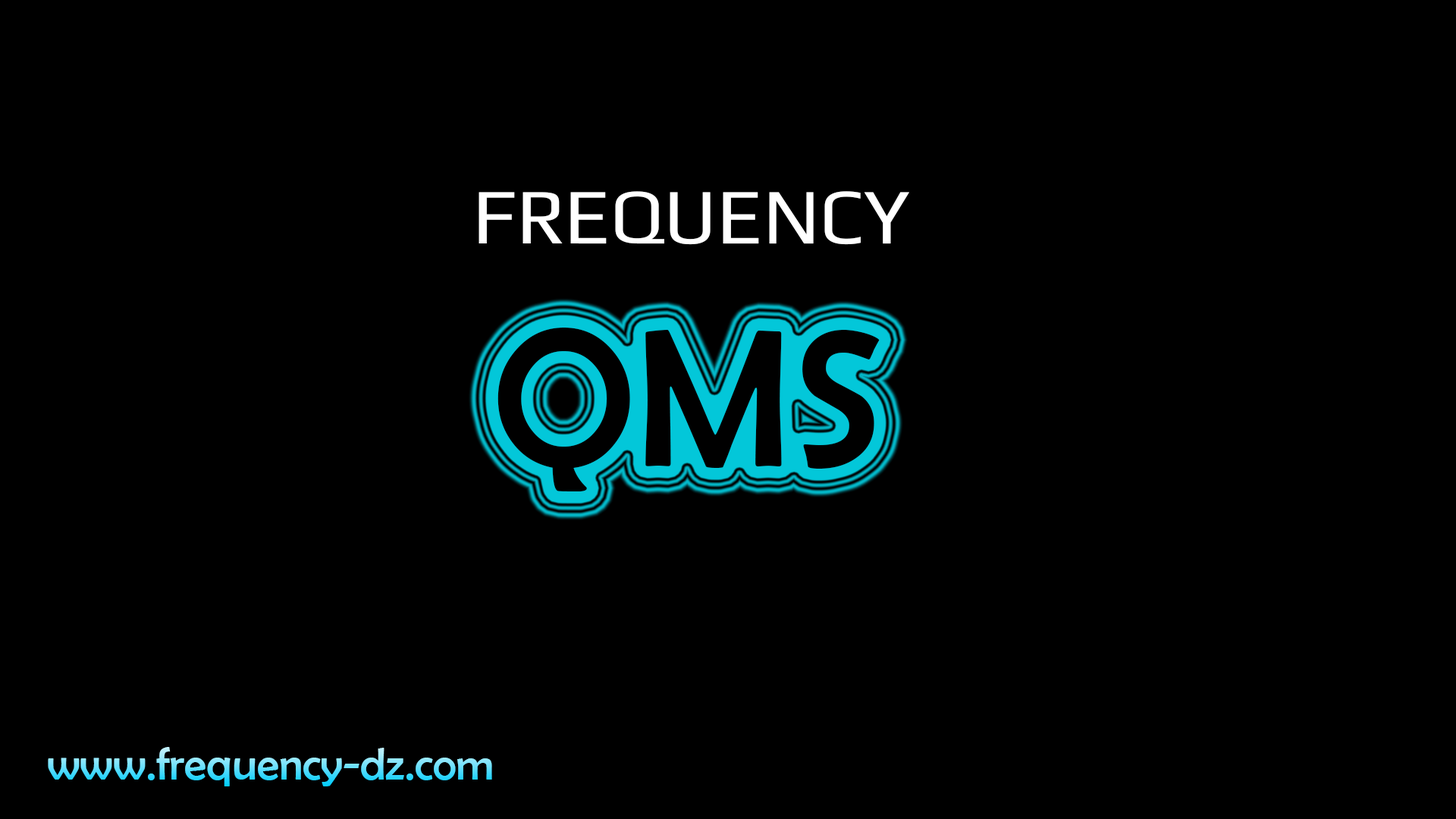
<style>
.page{position:relative;width:1456px;height:819px;background:#000000}
.page>*{position:absolute;margin:0}
.t1{font:78.9px "Play";color:#ffffff}
.t2{font:198px "BerlinSansFB-Reg";color:#000000}
.t3{font:45.5px "BerlinSansFB-Reg"}
</style>
<div class="page">
<p class="t1" style="left:479px;top:191px;width:430px;height:54px">FREQUENCY</p>
<p class="t2" style="left:497px;top:327px;width:383px;height:164px">QMS</p>
<p class="t3" style="left:48px;top:747px;width:444px;height:39px">www.frequency-dz.com</p>
</div>
